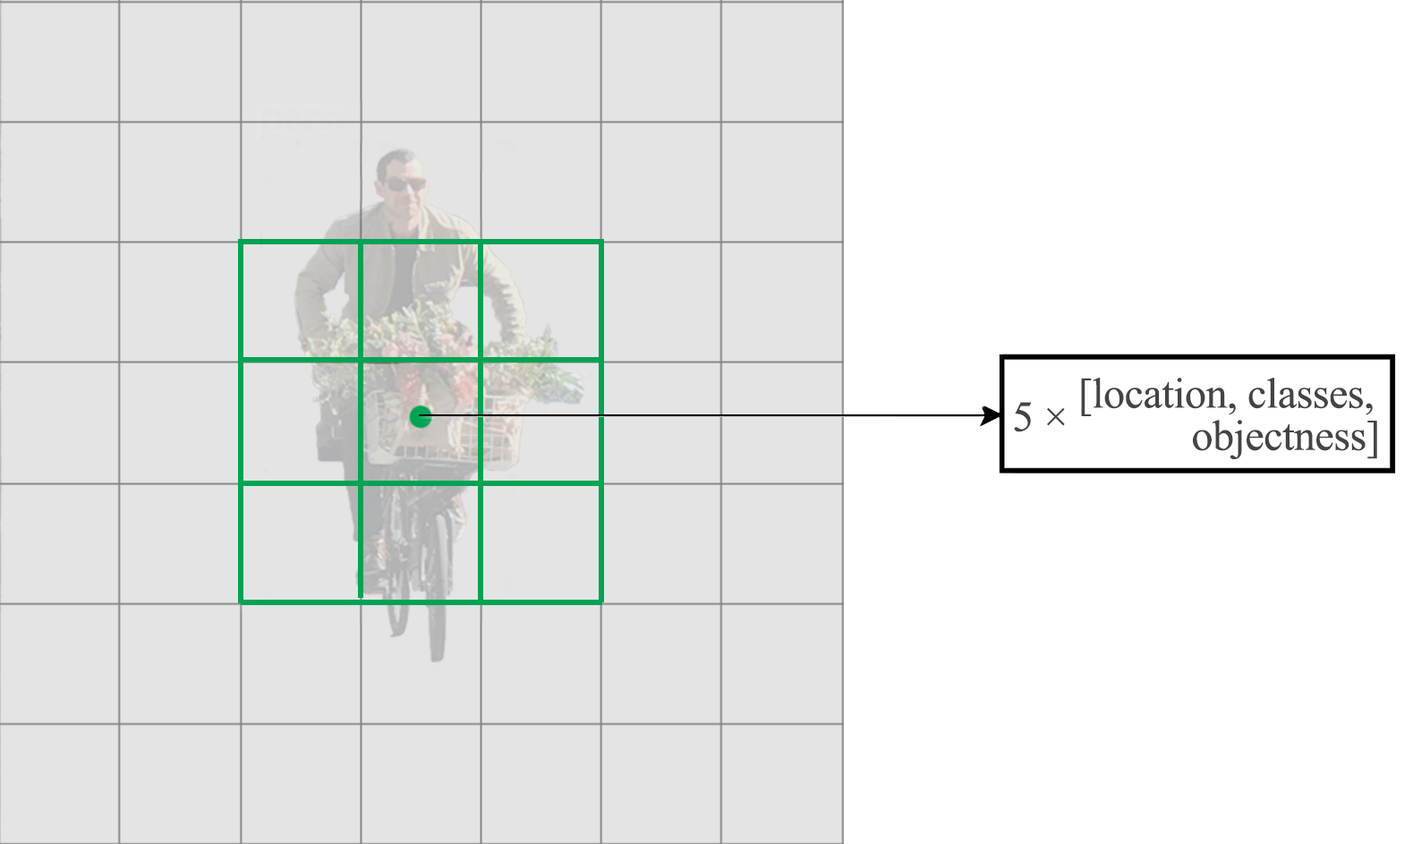
<style>
.page{position:relative;width:1413px;height:844px;background:#e4e4e4}
.page>*{position:absolute;margin:0}
.t1{font:43px/1.6px "TimesNewRomanPSMT";letter-spacing:-0.01em;color:#444444}
.t2{font:43px "TimesNewRomanPSMT";letter-spacing:-0.01em;color:#444444}
</style>
<div class="page">
<p class="t1" style="left:1081px;top:378px;width:296px;height:81px">[location, classes,<br><br><br><br>            objectness]</p>
<p class="t2" style="left:1014px;top:402px;width:51px;height:30px">5 ×</p>
</div>
